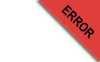
<style>
.page{position:relative;width:100px;height:62px;background:#ffffff}
.page>*{position:absolute;margin:0}
.t1{font:12.6px "Arial-BoldMT";color:#000000;font-variant:small-caps;scale:0.87 1}
</style>
<div class="page">
<p class="t1" style="left:61px;top:5px;width:33px;height:34px;rotate:45deg">ERROR</p>
</div>
